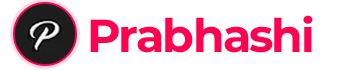
<style>
.page{position:relative;width:339px;height:70px;background:#ffffff}
.page>*{position:absolute;margin:0}
.t1{font:46px "Montserrat-Bold";letter-spacing:-0.04em;color:#ff014f}
</style>
<div class="page">
<p class="t1" style="left:90px;top:15px;width:223px;height:38px">Prabhashi</p>
</div>
